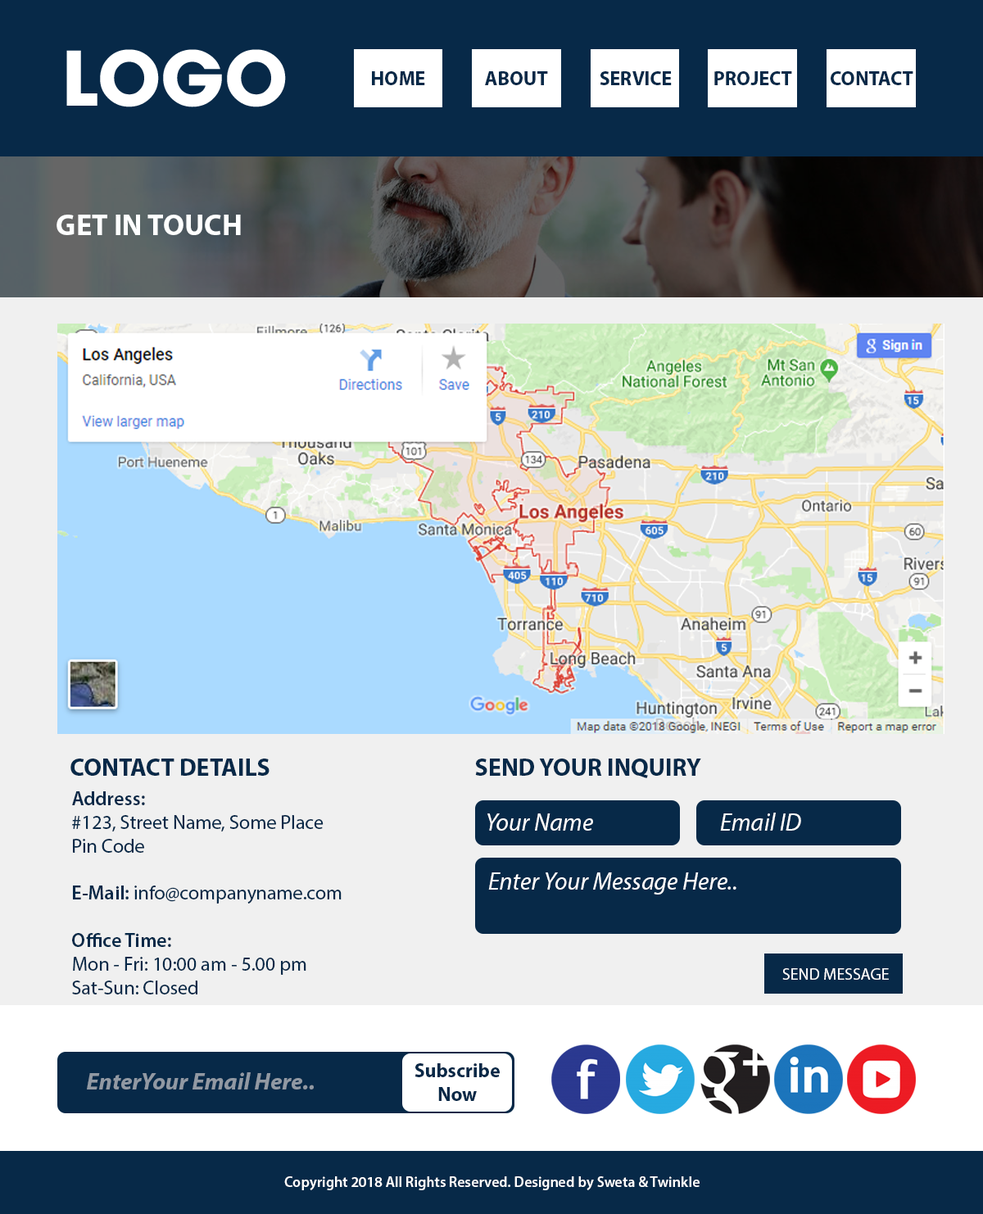
<style>
.page{position:relative;width:983px;height:1214px}
.page>*{position:absolute;margin:0}
.t1{font:19.7px "MyriadPro-Bold";color:#072948}
.t2{font:29.5px "MyriadPro-Bold";color:#feffff}
.t3{font:24.6px "MyriadPro-Bold";color:#072948}
.t4{font:19.7px "MyriadPro-Regular";color:#072948}
.t5{font:19.7px "MyriadPro-Semibold";color:#072948}
.t6{font:24.6px "MyriadPro-It";color:#ffffff}
.t7{font:16.4px "MyriadPro-Regular";color:#ffffff}
.t8{font:23.7px "MyriadPro-BoldIt";color:#9199a3}
.t9{font:14.7px "MyriadPro-Semibold";color:#ffffff}
</style>
<div class="page">
<p class="t1" style="left:372px;top:71px;width:53px;height:14px">HOME</p>
<p class="t1" style="left:485px;top:71px;width:63px;height:14px">ABOUT</p>
<p class="t1" style="left:599px;top:71px;width:72px;height:14px">SERVICE</p>
<p class="t1" style="left:714px;top:71px;width:78px;height:14px">PROJECT</p>
<p class="t1" style="left:830px;top:71px;width:83px;height:14px">CONTACT</p>
<p class="t2" style="left:57px;top:215px;width:184px;height:20px">GET IN TOUCH</p>
<p class="t3" style="left:70px;top:758px;width:199px;height:17px">CONTACT DETAILS</p>
<p class="t3" style="left:475px;top:758px;width:226px;height:20px">SEND YOUR INQUIRY</p>
<p class="t4" style="left:72px;top:791px;width:269px;height:203px"><span class="t5">Address:<br></span>#123, Street Name, Some Place<br>Pin Code<br><br><span class="t5">E-Mail:</span> info@companyname.com<br><br><span class="t5">Office Time:<br></span>Mon - Fri: 10:00 am - 5.00 pm <br>Sat-Sun: Closed</p>
<p class="t6" style="left:487px;top:813px;width:106px;height:17px">Your Name</p>
<p class="t6" style="left:720px;top:812px;width:81px;height:18px">Email ID</p>
<p class="t6" style="left:488px;top:872px;width:248px;height:22px">Enter Your Message Here..</p>
<p class="t7" style="left:782px;top:968px;width:106px;height:11px">SEND MESSAGE</p>
<p class="t8" style="left:87px;top:1072px;width:227px;height:17px">EnterYour Email Here..</p>
<p class="t1" style="left:414px;top:1063px;width:85px;height:38px;text-align:center">Subscribe<br>Now</p>
<p class="t9" style="left:284px;top:1176px;width:415px;height:14px">Copyright 2018 All Rights Reserved. Designed by Sweta &amp; Twinkle</p>
</div>
